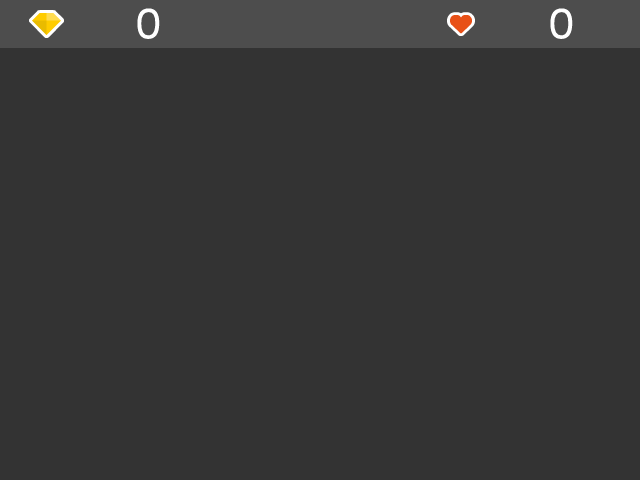
<style>
.page{position:relative;width:640px;height:480px;background:#333333}
.page>*{position:absolute;margin:0}
.t1{font:40px "ComicRelief";letter-spacing:0.05em;color:#ffffff}
</style>
<div class="page">
<p class="t1" style="left:137px;top:8px;width:23px;height:31px">0</p>
<p class="t1" style="left:550px;top:8px;width:23px;height:31px">0</p>
</div>
